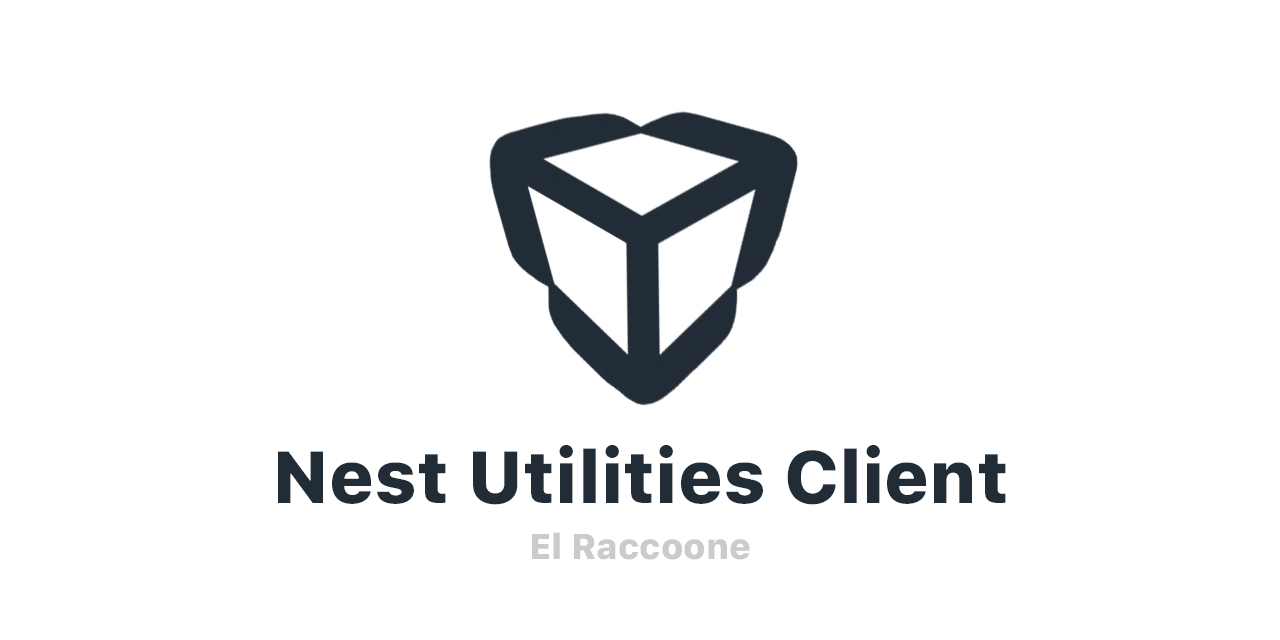
<style>
.page{position:relative;width:1280px;height:640px;background:#ffffff}
.page>*{position:absolute;margin:0}
.t1{font:73px "SFProText-Heavy";color:#222c36}
</style>
<div class="page">
<p class="t1" style="left:278px;top:444px;width:728px;height:61px">Nest Utilities Client</p>
</div>
